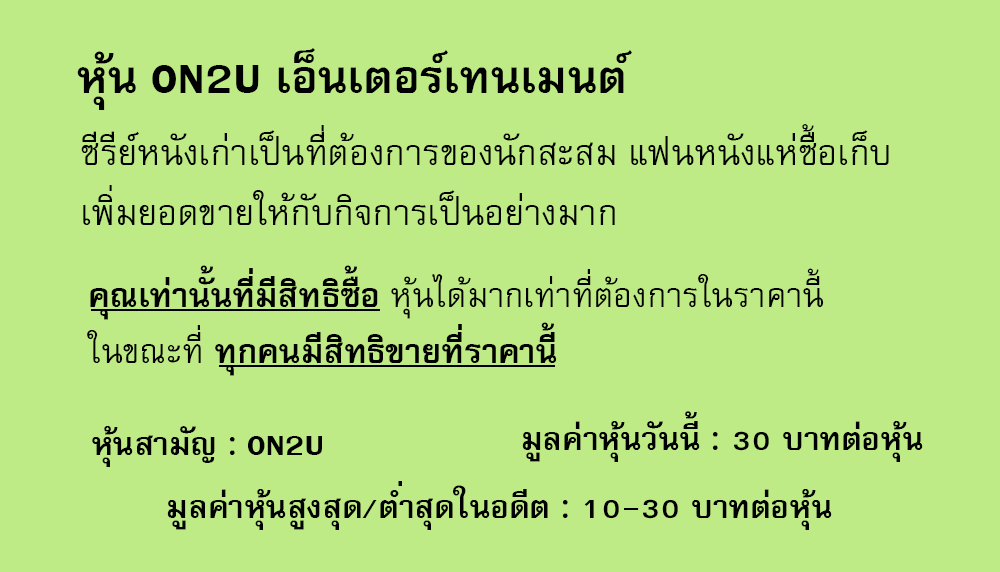
<style>
.page{position:relative;width:1000px;height:572px;background:#beeb85}
.page>*{position:absolute;margin:0}
.t1{font:64px "FreesiaUPCBold";color:#000000}
.t2{font:50px/60px "FreesiaUPC";color:#000000}
.t3{font:47px "FreesiaUPC";color:#000000}
.t4{font:47px "FreesiaUPCBold";color:#000000}
.t5{font:45px "FreesiaUPCBold";color:#000000}
</style>
<div class="page">
<p class="t1" style="left:77px;top:48px;width:555px;height:62px">หุ้น ON2U เอ็นเตอร์เทนเมนต์</p>
<p class="t2" style="left:81px;top:124px;width:808px;height:101px">ซีรีย์หนังเก่าเป็นที่ต้องการของนักสะสม แฟนหนังแห่ซื้อเก็บ <br>เพิ่มยอดขายให้กับกิจการเป็นอย่างมาก</p>
<p class="t3" style="left:87px;top:265px;width:737px;height:111px"><span class="t4">คุณเท่านั้นที่มีสิทธิซื้อ </span>หุ้นได้มากเท่าที่ต้องการในราคานี้<br>ในขณะที่<span class="t4"> ทุกคนมีสิทธิขายที่ราคานี้</span></p>
<p class="t5" style="left:522px;top:411px;width:401px;height:51px">มูลค่าหุ้นวันนี้ : 30 บาทต่อหุ้น</p>
<p class="t5" style="left:92px;top:426px;width:230px;height:41px">หุ้นสามัญ : ON2U</p>
<p class="t5" style="left:167px;top:481px;width:665px;height:49px">มูลค่าหุ้นสูงสุด/ต่ำสุดในอดีต : 10-30 บาทต่อหุ้น</p>
</div>
